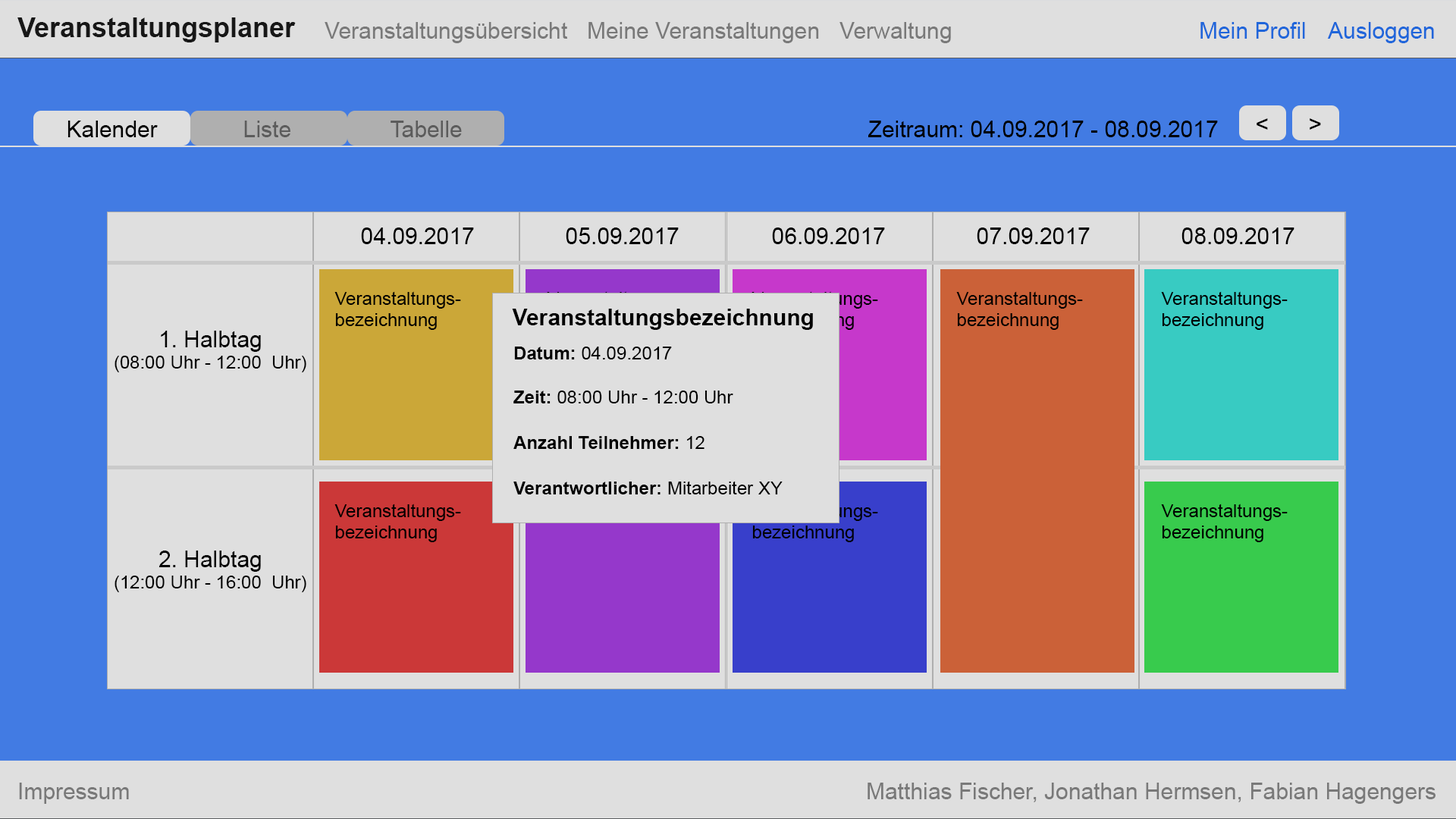
<style>
.page{position:relative;width:1456px;height:819px;background:#427be3}
.page>*{position:absolute;margin:0}
.t1{font:27.3px "Arial-BoldMT";color:#171717}
.t2{font:22.7px "ArialMT";color:#797979}
.t3{font:22.7px "ArialMT";color:#2066da}
.t4{font:22.7px "ArialMT";color:#000000}
.t5{font:22.7px "ArialMT";color:#5c5c5c}
.t6{font:18.2px "ArialMT";color:#000000}
.t7{font:22.7px "Arial-BoldMT";color:#000000}
.t8{font:18.2px "Arial-BoldMT";color:#000000}
.t9{font:18.2px "ArialMT"}
</style>
<div class="page">
<p class="t1" style="left:17px;top:17px;width:279px;height:25px">Veranstaltungsplaner</p>
<p class="t2" style="left:325px;top:22px;width:242px;height:21px">Veranstaltungsübersicht</p>
<p class="t2" style="left:588px;top:22px;width:231px;height:21px">Meine Veranstaltungen</p>
<p class="t2" style="left:839px;top:22px;width:112px;height:21px">Verwaltung</p>
<p class="t3" style="left:1200px;top:22px;width:105px;height:17px">Mein Profil</p>
<p class="t3" style="left:1327px;top:22px;width:107px;height:21px">Ausloggen</p>
<p class="t4" style="left:67px;top:121px;width:91px;height:16px">Kalender</p>
<p class="t5" style="left:244px;top:121px;width:46px;height:16px">Liste</p>
<p class="t5" style="left:391px;top:121px;width:71px;height:16px">Tabelle</p>
<p class="t4" style="left:868px;top:121px;width:350px;height:16px">Zeitraum: 04.09.2017 - 08.09.2017</p>
<p class="t4" style="left:1257px;top:118px;width:11px;height:12px">&lt;</p>
<p class="t4" style="left:1310px;top:118px;width:11px;height:12px">&gt;</p>
<p class="t4" style="left:361px;top:227px;width:113px;height:17px">04.09.2017</p>
<p class="t4" style="left:566px;top:227px;width:113px;height:17px">05.09.2017</p>
<p class="t4" style="left:772px;top:227px;width:113px;height:17px">06.09.2017</p>
<p class="t4" style="left:977px;top:227px;width:113px;height:17px">07.09.2017</p>
<p class="t4" style="left:1181px;top:227px;width:113px;height:17px">08.09.2017</p>
<p class="t6" style="left:334px;top:291px;width:127px;height:39px">Veranstaltungs-<br>bezeichnung</p>
<p class="t6" style="left:956px;top:291px;width:127px;height:39px">Veranstaltungs-<br>bezeichnung</p>
<p class="t6" style="left:1161px;top:291px;width:127px;height:39px">Veranstaltungs-<br>bezeichnung</p>
<p class="t7" style="left:512px;top:309px;width:301px;height:21px">Veranstaltungsbezeichnung</p>
<p class="t6" style="left:115px;top:331px;width:191px;height:41px;text-align:center"><span class="t4">1. Halbtag<br></span>(08:00 Uhr - 12:00  Uhr)</p>
<p class="t6" style="left:514px;top:347px;width:158px;height:12px"><span class="t8">Datum: </span>04.09.2017</p>
<p class="t6" style="left:513px;top:391px;width:220px;height:12px"><span class="t8">Zeit: </span>08:00 Uhr - 12:00 Uhr</p>
<p class="t8" style="left:513px;top:436px;width:191px;height:13px">Anzahl Teilnehmer: <span class="t6">12</span></p>
<p class="t8" style="left:513px;top:481px;width:270px;height:13px">Verantwortlicher: <span class="t6">Mitarbeiter XY</span></p>
<p class="t6" style="left:334px;top:504px;width:127px;height:38px">Veranstaltungs-<br>bezeichnung</p>
<p class="t9" style="left:751px;top:504px;width:127px;height:38px">Veranstaltungs-<br>bezeichnung</p>
<p class="t6" style="left:1161px;top:504px;width:127px;height:38px">Veranstaltungs-<br>bezeichnung</p>
<p class="t6" style="left:115px;top:551px;width:191px;height:41px;text-align:center"><span class="t4">2. Halbtag<br></span>(12:00 Uhr - 16:00  Uhr)</p>
<p class="t2" style="left:19px;top:783px;width:110px;height:21px">Impressum</p>
<p class="t2" style="left:868px;top:783px;width:568px;height:21px">Matthias Fischer, Jonathan Hermsen, Fabian Hagengers</p>
</div>
